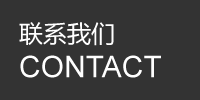
<style>
.page{position:relative;width:200px;height:100px;background:#333333}
.page>*{position:absolute;margin:0}
.t1{font:30px/36px "ArialMT";color:#ffffff;text-transform:uppercase}
.t2{font:24px/30px "MicrosoftYaHei";color:#ffffff;text-transform:uppercase}
</style>
<div class="page">
<p class="t1" style="left:19px;top:22px;width:142px;height:56px"><span class="t2">联系我们<br></span>contact</p>
</div>
